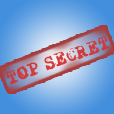
<style>
.page{position:relative;width:114px;height:114px}
.page>*{position:absolute;margin:0}
.t1{font:18.6px "X-Classified";color:#d83b3b}
</style>
<div class="page">
<p class="t1" style="left:6px;top:36px;width:104px;height:49px;rotate:-20deg">TOP SECRET</p>
</div>
